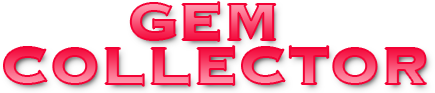
<style>
.page{position:relative;width:435px;height:93px;background:#ffffff}
.page>*{position:absolute;margin:0}
.t1{font:69px/44px "Copperplate-Bold";text-transform:uppercase}
</style>
<div class="page">
<p class="t1" style="left:4px;top:2px;width:422px;height:84px;text-align:center">Gem <br>Collector</p>
</div>
